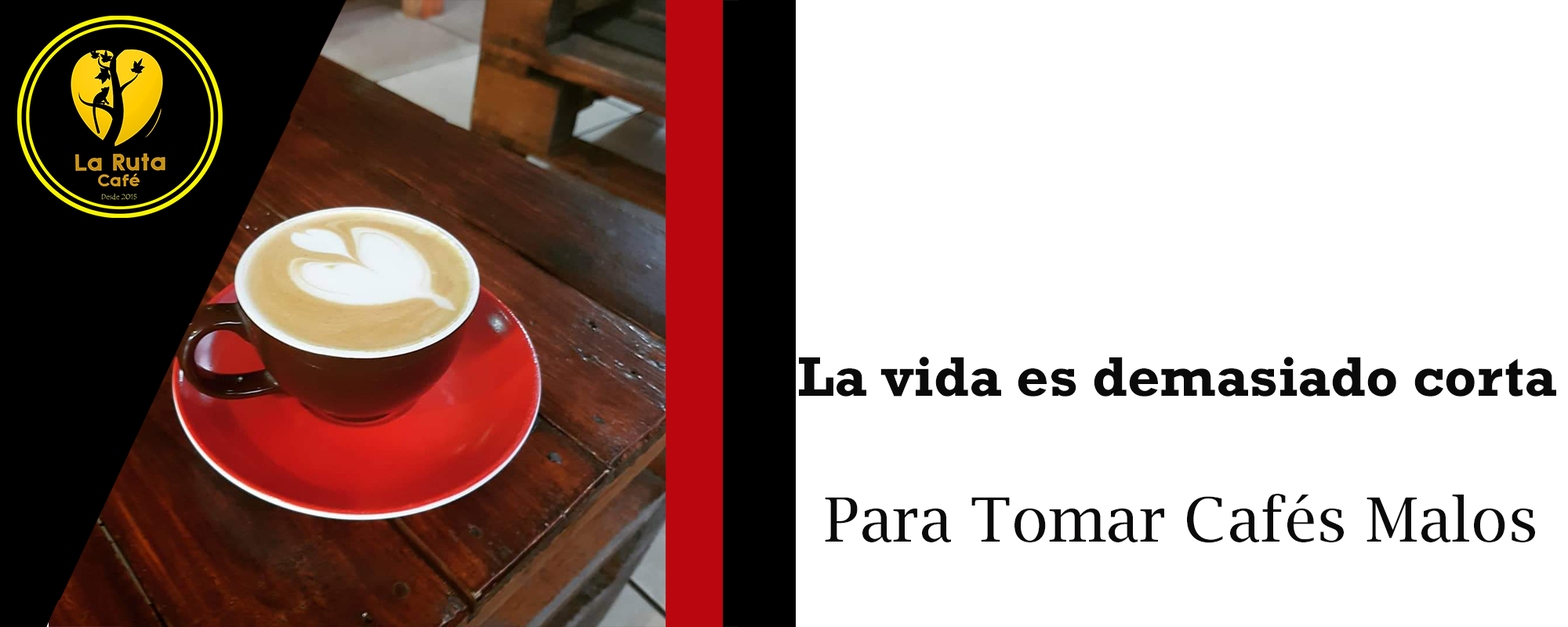
<style>
.page{position:relative;width:1568px;height:627px;background:#ffffff}
.page>*{position:absolute;margin:0}
.t1{font:56.6px "Rockwell-Bold";color:#0b0a0a}
.t2{font:61px "LucidaBright";color:#0b0a0a}
</style>
<div class="page">
<p class="t1" style="left:799px;top:357px;width:757px;height:40px">La vida es demasiado corta</p>
<p class="t2" style="left:825px;top:494px;width:710px;height:49px">Para Tomar Cafés Malos</p>
</div>
